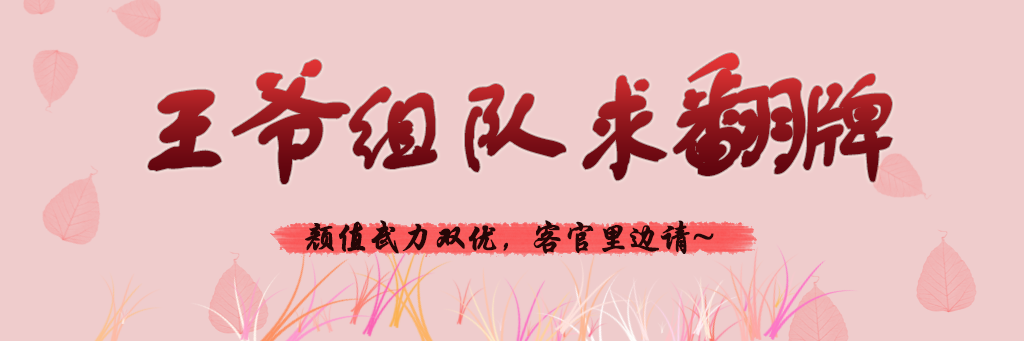
<style>
.page{position:relative;width:1024px;height:341px;background:#efcccc}
.page>*{position:absolute;margin:0}
.t1{font:120px "FZSTK--GBK1-0";letter-spacing:-0.1em;font-weight:bold}
.t2{font:120px "FZSTK--GBK1-0";letter-spacing:-0.2em;font-weight:bold}
.t3{font:140px "FZSTK--GBK1-0";letter-spacing:-0.2em;font-weight:bold}
.t4{font:160px "FZSTK--GBK1-0";letter-spacing:-0.2em;font-weight:bold}
.t5{font:35px "STXingkai";letter-spacing:-0.1em;color:#250707;font-weight:bold}
</style>
<div class="page">
<p class="t1" style="left:148px;top:53px;width:745px;height:131px"><span class="t2">王</span><span class="t3">爷</span>组队<span class="t2">求</span><span class="t4">翻</span><span class="t2">牌</span></p>
<p class="t5" style="left:305px;top:220px;width:409px;height:34px">颜值武力双优，客官里边请~</p>
</div>
